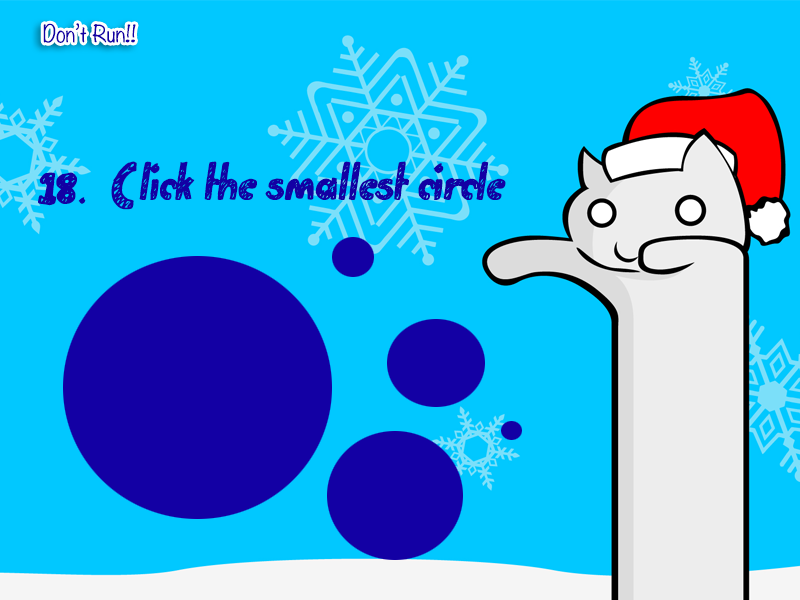
<style>
.page{position:relative;width:800px;height:600px;background:#01c8ff}
.page>*{position:absolute;margin:0}
.t1{font:20.8px "Noteworthy-Light";color:#1300a4}
.t2{font:45.8px "Golden-Star";color:#1300a4}
.t3{font:37.5px "Golden-Star";color:#1300a4}
</style>
<div class="page">
<p class="t1" style="left:43px;top:23px;width:93px;height:20px">Don’t Run!!</p>
<p class="t2" style="left:111px;top:161px;width:395px;height:49px">C lick the smallest circle</p>
<p class="t3" style="left:38px;top:172px;width:48px;height:34px">18.</p>
</div>
